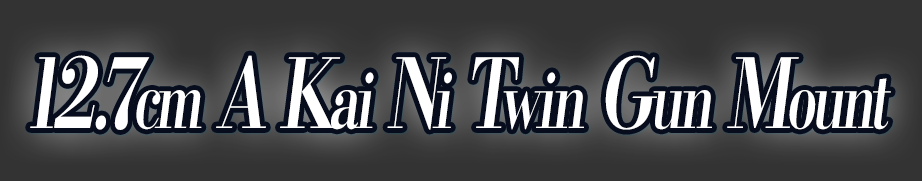
<style>
.page{position:relative;width:922px;height:181px;background:#333333}
.page>*{position:absolute;margin:0}
.t1{font:96px "KochoStd-Heavy";letter-spacing:-0.08em;color:#ffffff;font-style:italic;scale:0.72 1}
.t2{font:76.8px "KochoStd-Heavy";letter-spacing:-0.08em;color:#ffffff;font-style:italic;scale:0.72 1}
</style>
<div class="page">
<p class="t1" style="left:30px;top:55px;width:861px;height:75px">12.7<span class="t2">cm</span> A K<span class="t2">ai</span> N<span class="t2">i</span> T<span class="t2">win</span> G<span class="t2">un</span> M<span class="t2">ount</span></p>
</div>
